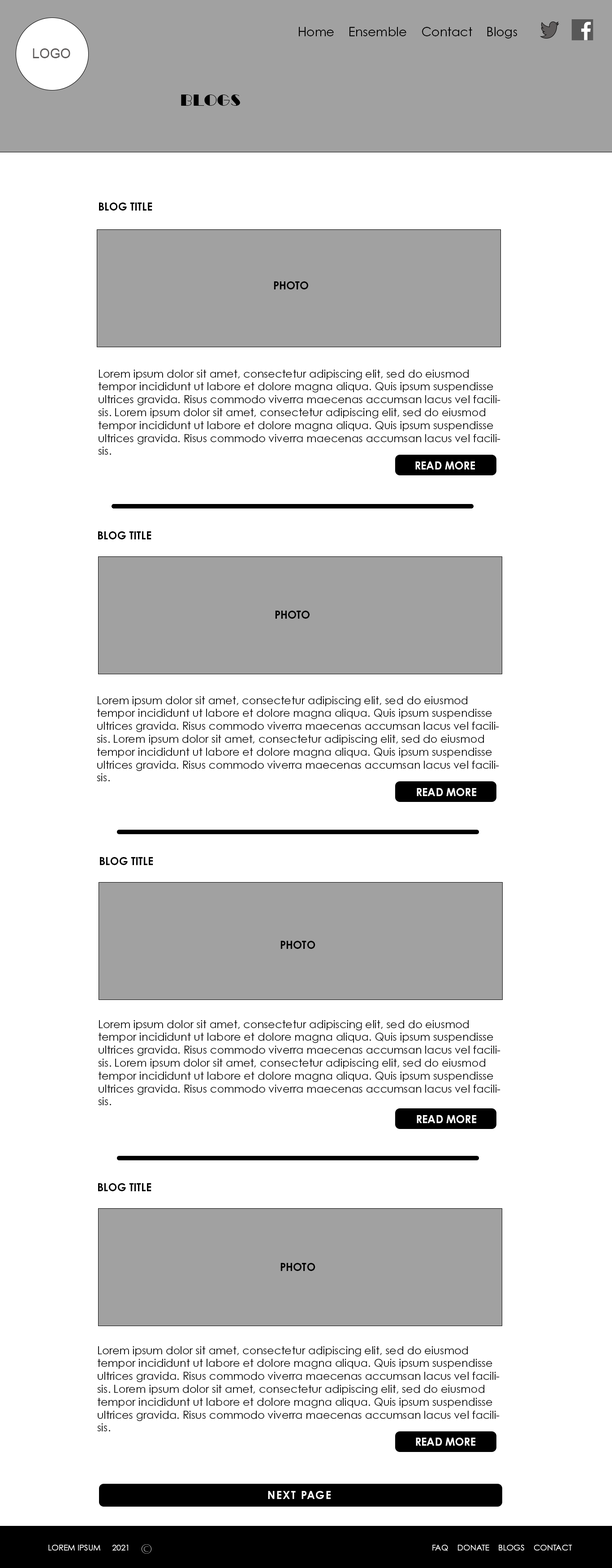
<style>
.page{position:relative;width:612px;height:1568px;background:#ffffff}
.page>*{position:absolute;margin:0}
.t1{font:12.5px "CenturyGothicPro";color:#000000}
.t2{font:13.4px "ArialMT";color:#5f5c5c}
.t3{font:16.1px "LTCBroadway-Regular";color:#010101}
.t4{font:10.8px "CenturyGothicPro-Bold";color:#010101}
.t5{font:10.8px "CenturyGothicPro";color:#010101}
.t6{font:10.8px "CenturyGothicPro-Bold";color:#fefefe}
.t7{font:10.8px "CenturyGothicPro-Bold";letter-spacing:0.1em;color:#fefefe}
.t8{font:8.1px "CenturyGothicPro";color:#ffffff}
</style>
<div class="page">
<p class="t1" style="left:299px;top:27px;width:218px;height:12px">Home    Ensemble    Contact    Blogs</p>
<p class="t2" style="left:33px;top:48px;width:37px;height:10px">LOGO</p>
<p class="t3" style="left:181px;top:95px;width:59px;height:11px">BLOGS</p>
<p class="t4" style="left:99px;top:202px;width:53px;height:9px">BLOG TITLE</p>
<p class="t4" style="left:274px;top:281px;width:34px;height:8px">PHOTO</p>
<p class="t5" style="left:98px;top:370px;width:402px;height:85px">Lorem ipsum dolor sit amet, consectetur adipiscing elit, sed do eiusmod tempor incididunt ut labore et dolore magna aliqua. Quis ipsum suspendisse ultrices gravida. Risus commodo viverra maecenas accumsan lacus vel facilisis. Lorem ipsum dolor sit amet, consectetur adipiscing elit, sed do eiusmod tempor incididunt ut labore et dolore magna aliqua. Quis ipsum suspendisse ultrices gravida. Risus commodo viverra maecenas accumsan lacus vel facilisis.</p>
<p class="t6" style="left:415px;top:461px;width:60px;height:9px">READ MORE</p>
<p class="t4" style="left:98px;top:531px;width:53px;height:8px">BLOG TITLE</p>
<p class="t4" style="left:275px;top:611px;width:35px;height:8px">PHOTO</p>
<p class="t5" style="left:97px;top:696px;width:402px;height:85px">Lorem ipsum dolor sit amet, consectetur adipiscing elit, sed do eiusmod tempor incididunt ut labore et dolore magna aliqua. Quis ipsum suspendisse ultrices gravida. Risus commodo viverra maecenas accumsan lacus vel facilisis. Lorem ipsum dolor sit amet, consectetur adipiscing elit, sed do eiusmod tempor incididunt ut labore et dolore magna aliqua. Quis ipsum suspendisse ultrices gravida. Risus commodo viverra maecenas accumsan lacus vel facilisis.</p>
<p class="t6" style="left:417px;top:788px;width:59px;height:8px">READ MORE</p>
<p class="t4" style="left:100px;top:857px;width:53px;height:8px">BLOG TITLE</p>
<p class="t4" style="left:280px;top:941px;width:35px;height:8px">PHOTO</p>
<p class="t5" style="left:98px;top:1020px;width:402px;height:85px">Lorem ipsum dolor sit amet, consectetur adipiscing elit, sed do eiusmod tempor incididunt ut labore et dolore magna aliqua. Quis ipsum suspendisse ultrices gravida. Risus commodo viverra maecenas accumsan lacus vel facilisis. Lorem ipsum dolor sit amet, consectetur adipiscing elit, sed do eiusmod tempor incididunt ut labore et dolore magna aliqua. Quis ipsum suspendisse ultrices gravida. Risus commodo viverra maecenas accumsan lacus vel facilisis.</p>
<p class="t6" style="left:417px;top:1115px;width:59px;height:8px">READ MORE</p>
<p class="t4" style="left:98px;top:1183px;width:53px;height:8px">BLOG TITLE</p>
<p class="t4" style="left:280px;top:1263px;width:35px;height:8px">PHOTO</p>
<p class="t5" style="left:97px;top:1346px;width:403px;height:85px">Lorem ipsum dolor sit amet, consectetur adipiscing elit, sed do eiusmod tempor incididunt ut labore et dolore magna aliqua. Quis ipsum suspendisse ultrices gravida. Risus commodo viverra maecenas accumsan lacus vel facilisis. Lorem ipsum dolor sit amet, consectetur adipiscing elit, sed do eiusmod tempor incididunt ut labore et dolore magna aliqua. Quis ipsum suspendisse ultrices gravida. Risus commodo viverra maecenas accumsan lacus vel facilisis.</p>
<p class="t6" style="left:416px;top:1438px;width:59px;height:8px">READ MORE</p>
<p class="t7" style="left:268px;top:1491px;width:63px;height:8px">NEXT PAGE</p>
<p class="t8" style="left:48px;top:1545px;width:80px;height:6px">LOREM IPSUM     2021</p>
<p class="t8" style="left:432px;top:1545px;width:140px;height:6px">FAQ    DONATE    BLOGS    CONTACT</p>
</div>
